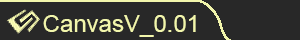
<style>
.page{position:relative;width:300px;height:40px;background:#282828}
.page>*{position:absolute;margin:0}
.t1{font:24px "ArialMT";color:#f2f6ac}
</style>
<div class="page">
<p class="t1" style="left:43px;top:15px;width:153px;height:22px">CanvasV_0.01</p>
</div>
